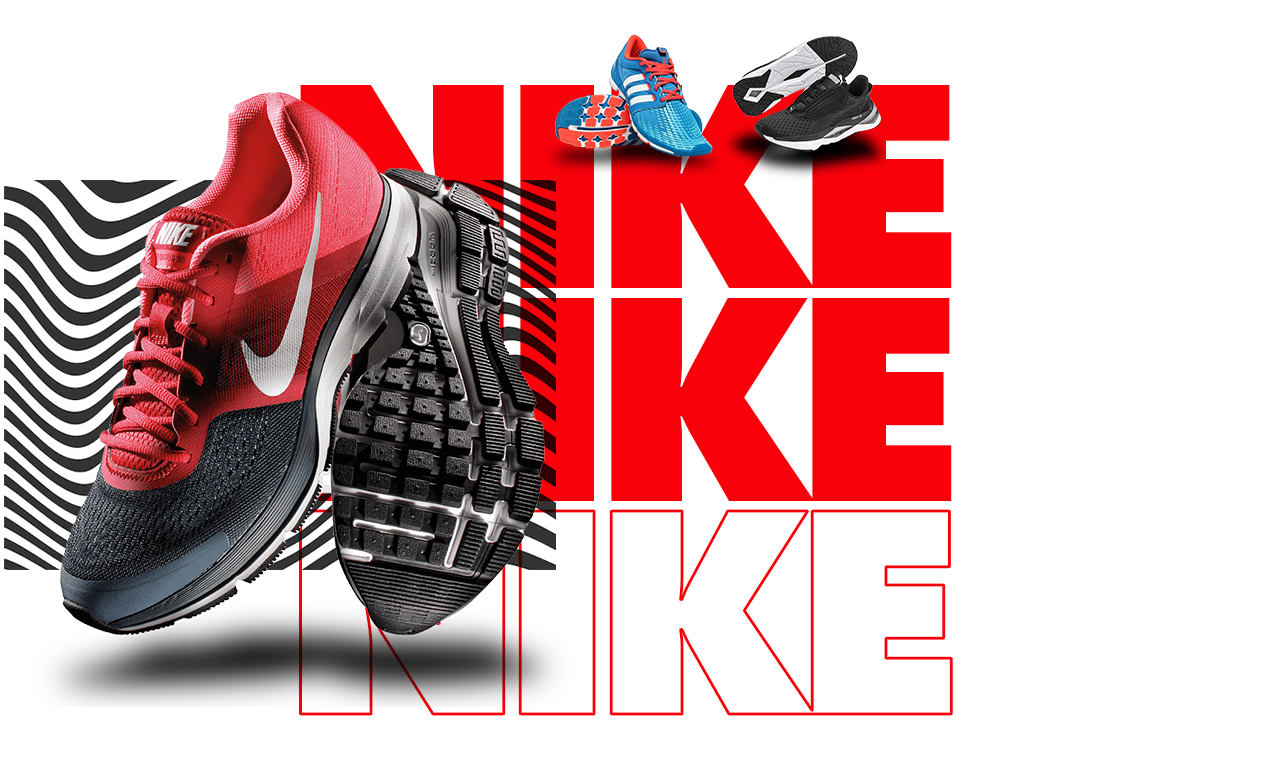
<style>
.page{position:relative;width:1280px;height:768px;background:#ffffff}
.page>*{position:absolute;margin:0}
.t1{font:305px "FuturaPT-ExtraBold";letter-spacing:-0.08em}
.t2{font:305px "FuturaPT-ExtraBold";letter-spacing:-0.08em;color:#f9000a}
</style>
<div class="page">
<p class="t1" style="left:300px;top:85px;width:652px;height:203px">NIKE</p>
<p class="t2" style="left:300px;top:298px;width:652px;height:203px">NIKE</p>
</div>
